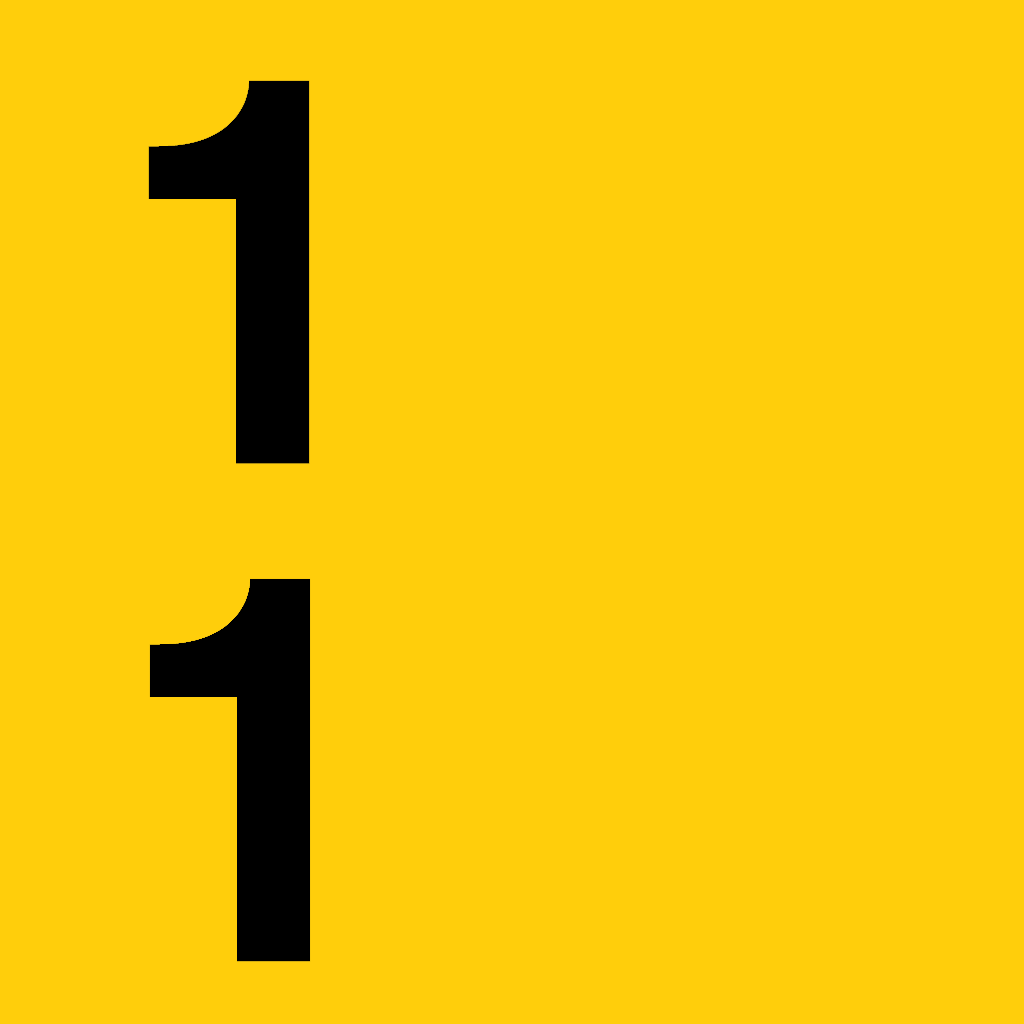
<style>
.page{position:relative;width:1024px;height:1024px;background:#ffce0b}
.page>*{position:absolute;margin:0}
.t1{font:500px "H2gtrE";color:#000000}
</style>
<div class="page">
<p class="t1" style="left:148px;top:80px;width:162px;height:384px">1</p>
</div>
